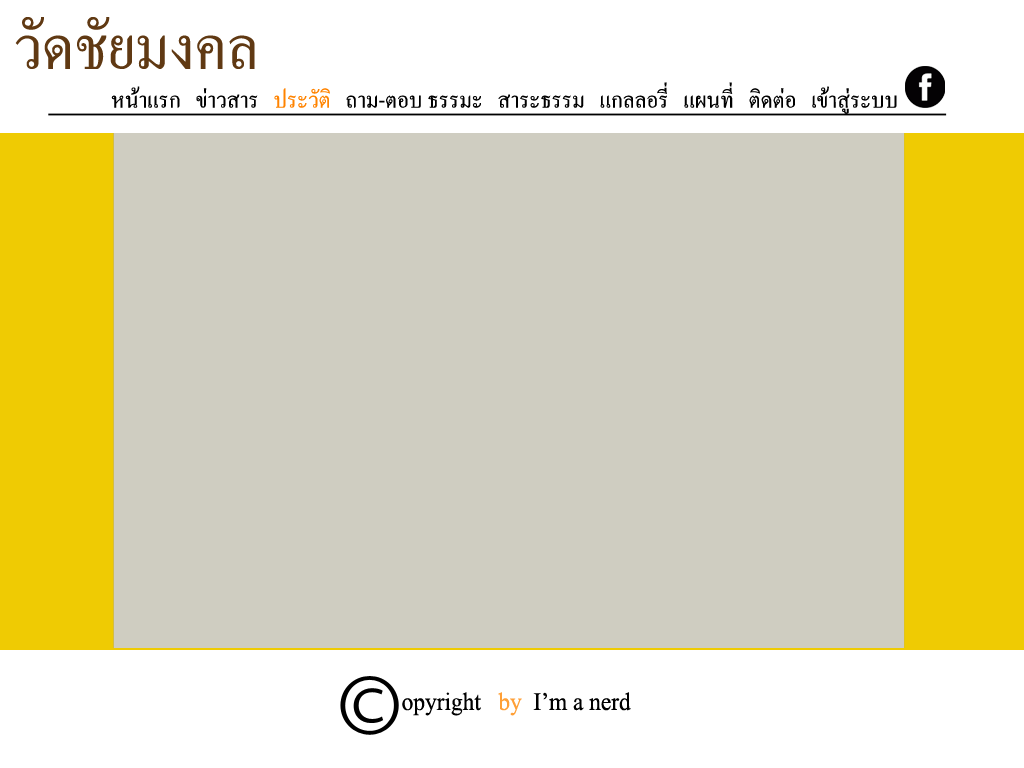
<style>
.page{position:relative;width:1024px;height:768px;background:#cfcdc1}
.page>*{position:absolute;margin:0}
.t1{font:83.2px "AngsanaNew";color:#603913}
.t2{font:30px "AngsanaNew";color:#000000}
.t3{font:30px "AngsanaNew";color:#ffa037}
.t4{font:30px "AngsanaNew";color:#ff8300}
</style>
<div class="page">
<p class="t1" style="left:15px;top:17px;width:240px;height:52px">วัดชัยมงคล</p>
<p class="t2" style="left:111px;top:82px;width:786px;height:32px"><span class="t3">   </span>หน้าแรก   ข่าวสาร   <span class="t4">ประวัติ </span>  ถาม-ตอบ ธรรมะ   สาระธรรม   แกลลอรี่   แผนที่   ติดต่อ   เข้าสู่ระบบ</p>
</div>
